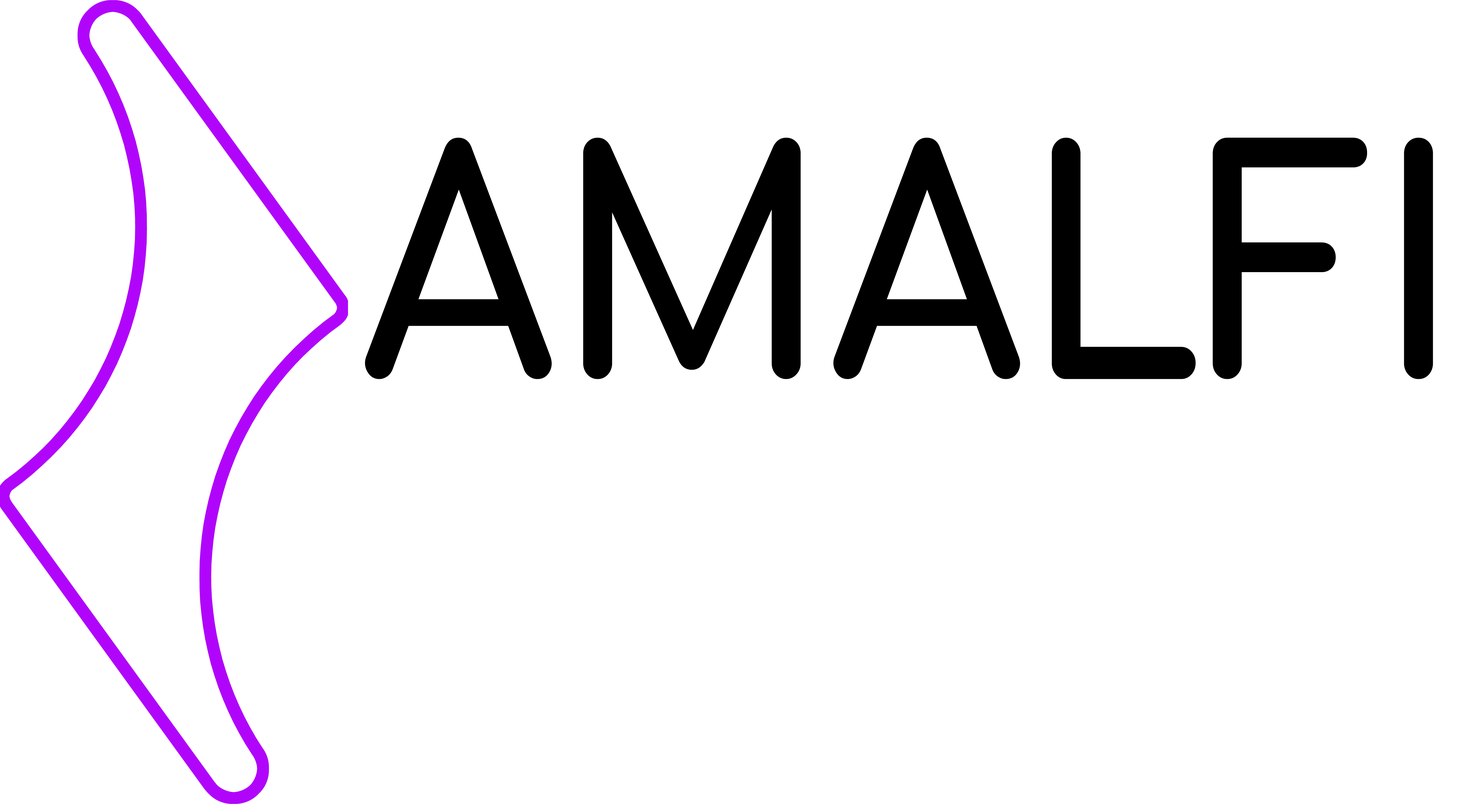
<style>
.page{position:relative;width:1483px;height:804px;background:#ffffff}
.page>*{position:absolute;margin:0}
.t1{font:309px "Comfortaa-Bold";color:#000000;scale:0.9 1}
</style>
<div class="page">
<p class="t1" style="left:365px;top:138px;width:1068px;height:241px">AMALFI</p>
</div>
